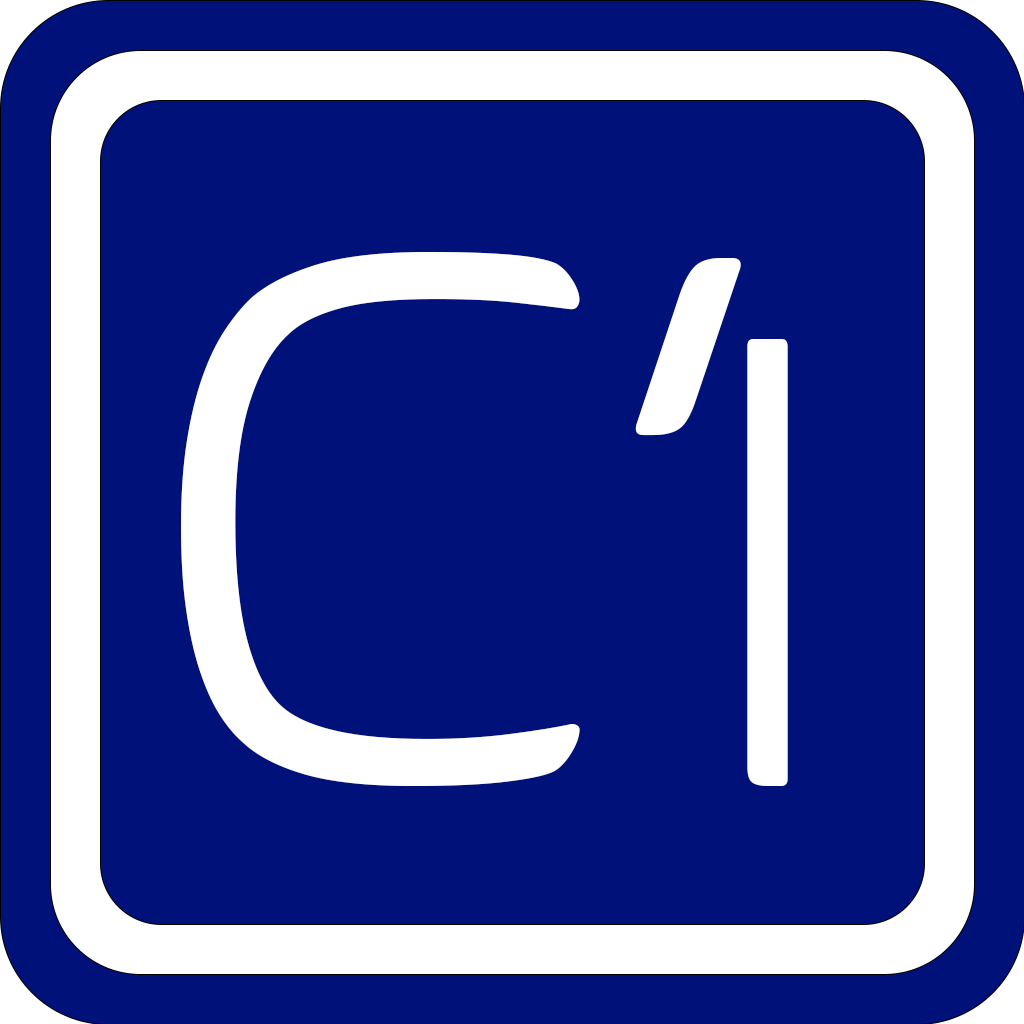
<style>
.page{position:relative;width:1024px;height:1024px;background:#001279}
.page>*{position:absolute;margin:0}
.t1{font:775px "BiomeW04-Light";color:#ffffff}
.t2{font:600px "BiomeW04-Light";color:#ffffff}
</style>
<div class="page">
<p class="t1" style="left:181px;top:252px;width:560px;height:534px">C‘</p>
<p class="t2" style="left:747px;top:339px;width:41px;height:447px">l</p>
</div>
